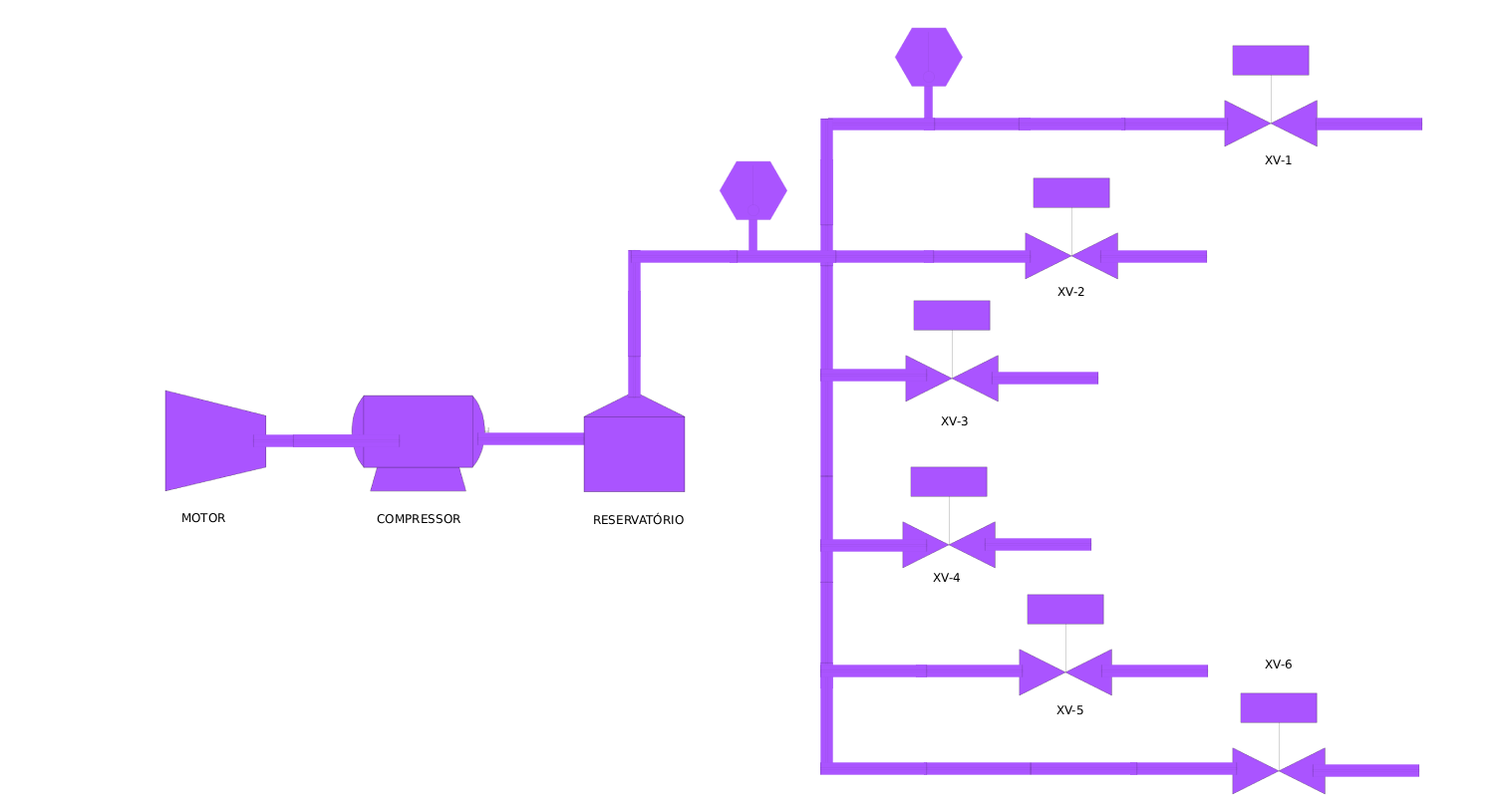
<style>
.page{position:relative;width:1495px;height:797px;background:#ffffff}
.page>*{position:absolute;margin:0}
.t1{font:12px "DejaVuSans";color:#000000}
</style>
<div class="page">
<p class="t1" style="left:1265px;top:156px;width:27px;height:8px">XV-1</p>
<p class="t1" style="left:1058px;top:287px;width:27px;height:9px">XV-2</p>
<p class="t1" style="left:941px;top:417px;width:27px;height:10px">XV-3</p>
<p class="t1" style="left:182px;top:513px;width:43px;height:10px">MOTOR</p>
<p class="t1" style="left:377px;top:514px;width:84px;height:10px">COMPRESSOR</p>
<p class="t1" style="left:594px;top:512px;width:90px;height:13px">RESERVATÓRIO</p>
<p class="t1" style="left:933px;top:573px;width:27px;height:9px">XV-4</p>
<p class="t1" style="left:1265px;top:660px;width:27px;height:10px">XV-6</p>
<p class="t1" style="left:1057px;top:706px;width:27px;height:10px">XV-5</p>
</div>
